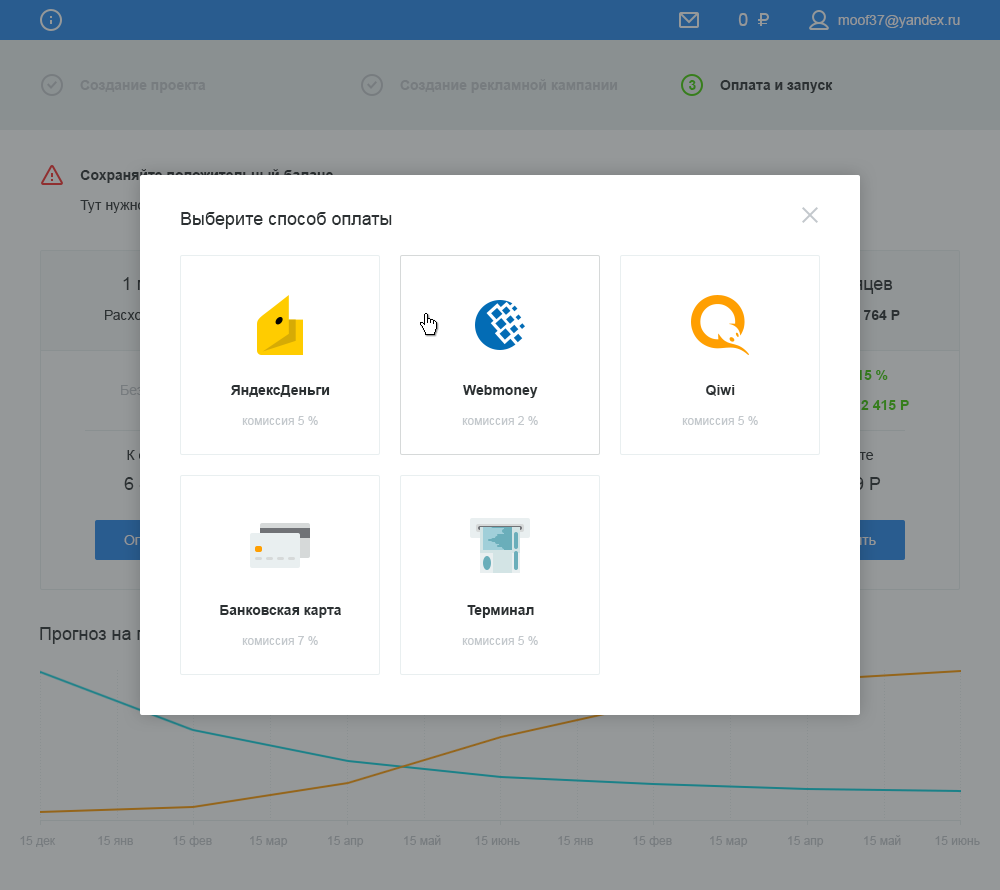
<style>
.page{position:relative;width:1000px;height:890px;background:#ffffff}
.page>*{position:absolute;margin:0}
.t1{font:18px "ArialMT";color:#2c3133}
.t2{font:14px "Arial-BoldMT";color:#2c3133}
.t3{font:12px "ArialMT";color:#c3c8cc}
</style>
<div class="page">
<p class="t1" style="left:181px;top:212px;width:211px;height:17px">Выберите способ оплаты</p>
<p class="t2" style="left:231px;top:385px;width:99px;height:12px">ЯндексДеньги</p>
<p class="t2" style="left:463px;top:385px;width:75px;height:13px">Webmoney</p>
<p class="t2" style="left:706px;top:385px;width:29px;height:11px">Qiwi</p>
<p class="t3" style="left:242px;top:416px;width:76px;height:9px">комиссия 5 %</p>
<p class="t3" style="left:462px;top:416px;width:76px;height:9px">комиссия 2 %</p>
<p class="t3" style="left:682px;top:416px;width:76px;height:9px">комиссия 5 %</p>
<p class="t2" style="left:220px;top:605px;width:121px;height:13px">Банковская карта</p>
<p class="t2" style="left:467px;top:605px;width:67px;height:13px">Терминал</p>
<p class="t3" style="left:242px;top:636px;width:76px;height:9px">комиссия 7 %</p>
<p class="t3" style="left:462px;top:636px;width:76px;height:9px">комиссия 5 %</p>
</div>
